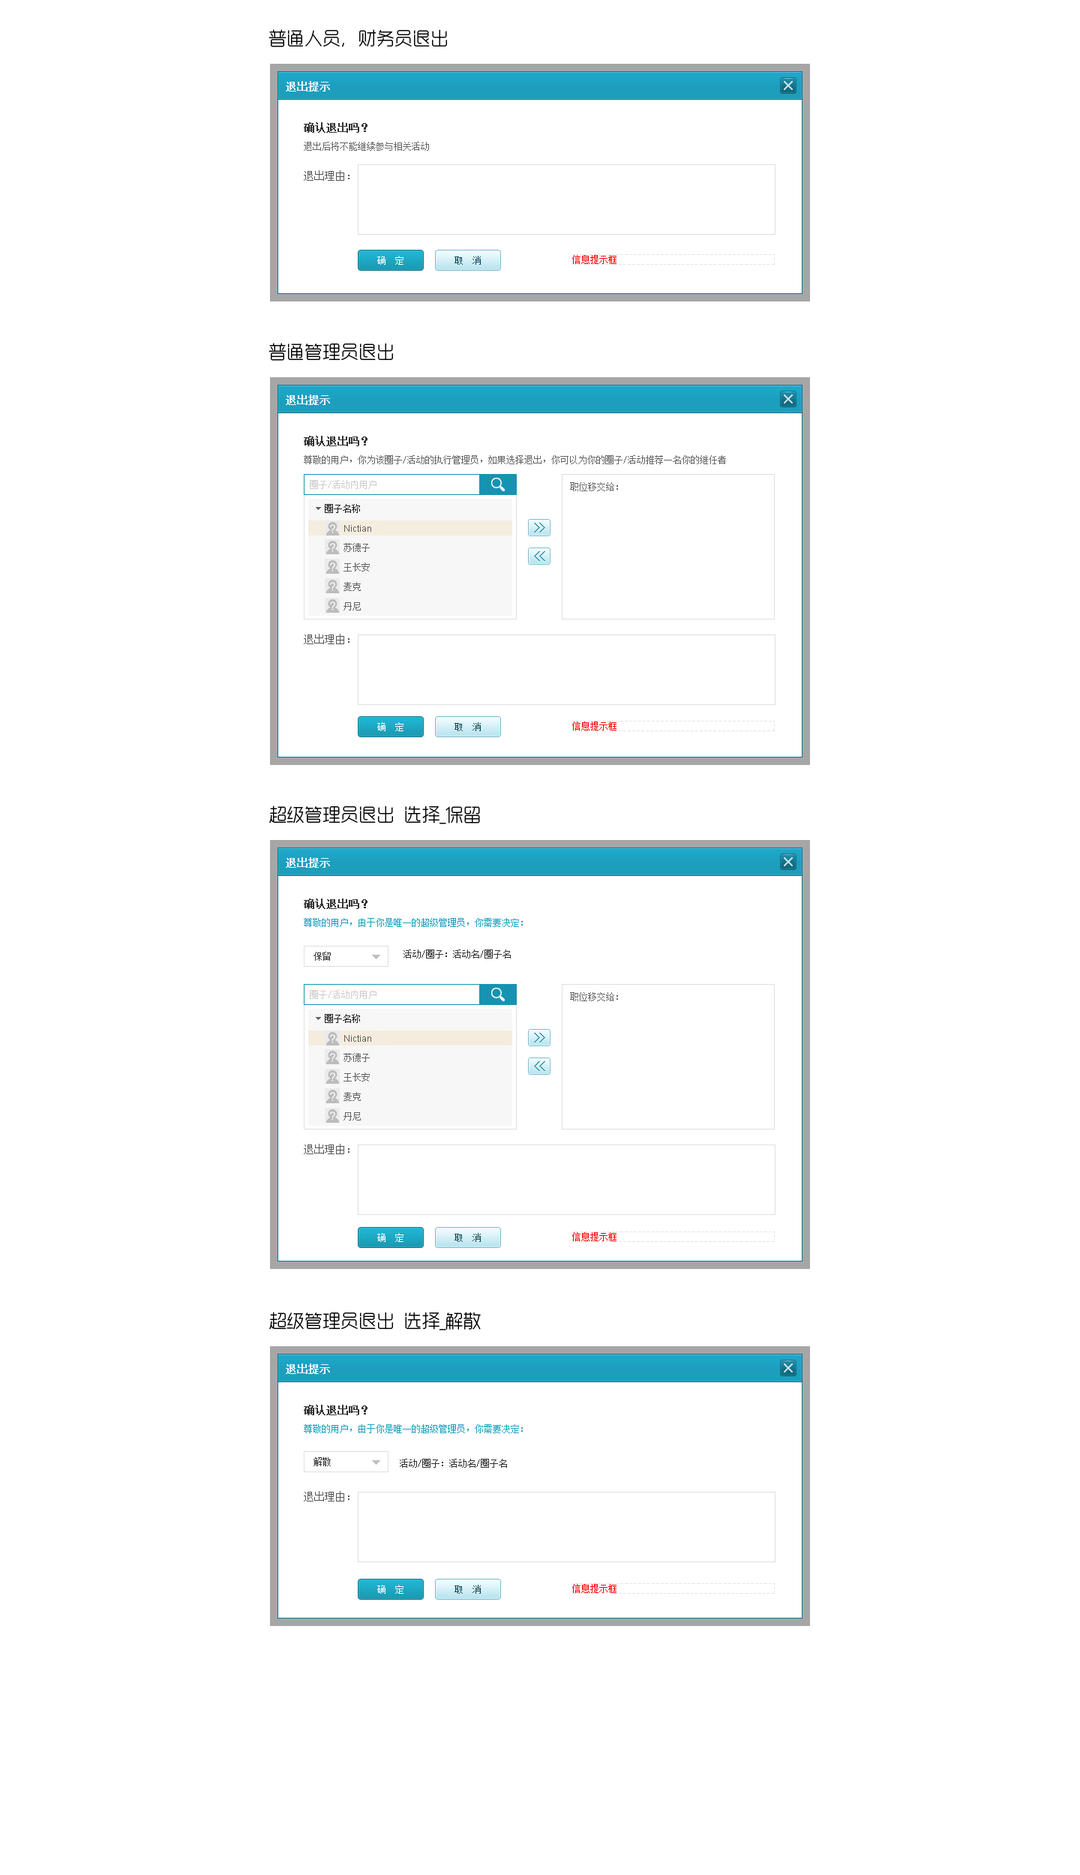
<style>
.page{position:relative;width:1080px;height:1875px;background:#ffffff}
.page>*{position:absolute;margin:0}
.t1{font:18px "RTWSYueGoTrial-Light";color:#000000}
.t2{font:10.5px "SimSun";color:#eef7fe;font-weight:bold}
.t3{font:10.5px "SimSun";color:#333333;font-weight:bold}
.t4{font:9px/28.5px "SimSun";color:#666666}
.t5{font:10.5px/28.5px "SimSun";color:#555555}
.t6{font:9px "SimSun";color:#ffffff}
.t7{font:9px "SimSun";color:#044455}
.t8{font:9px "SimSun";color:#666666}
.t9{font:9px "SimSun";color:#cccccc}
.t10{font:10.5px "SimSun";color:#555555}
.t11{font:9px "SimSun";color:#1ca1c1}
.t12{font:9px "SimSun";color:#333333}
</style>
<div class="page">
<p class="t1" style="left:268px;top:29px;width:179px;height:18px">普通人员，财务员退出</p>
<p class="t2" style="left:286px;top:81px;width:44px;height:11px">退出提示</p>
<p class="t3" style="left:304px;top:122px;width:64px;height:11px">确认退出吗？</p>
<p class="t4" style="left:304px;top:142px;width:125px;height:39px">退出后将不能继续参与相关活动<br><span class="t5">退出理由：</span></p>
<p class="t6" style="left:377px;top:256px;width:27px;height:9px">确  定</p>
<p class="t7" style="left:454px;top:256px;width:27px;height:9px">取  消</p>
<p class="t1" style="left:268px;top:343px;width:125px;height:18px">普通管理员退出</p>
<p class="t2" style="left:286px;top:394px;width:44px;height:11px">退出提示</p>
<p class="t3" style="left:304px;top:436px;width:64px;height:10px">确认退出吗？</p>
<p class="t8" style="left:304px;top:455px;width:422px;height:9px">尊敬的用户，你为该圈子/活动的执行管理员，如果选择退出，你可以为你的圈子/活动推荐一名你的继任者</p>
<p class="t9" style="left:310px;top:480px;width:66px;height:9px">圈子/活动内用户</p>
<p class="t8" style="left:570px;top:482px;width:48px;height:9px">职位移交给：</p>
<p class="t10" style="left:304px;top:634px;width:46px;height:10px">退出理由：</p>
<p class="t6" style="left:377px;top:722px;width:27px;height:9px">确  定</p>
<p class="t7" style="left:454px;top:722px;width:27px;height:9px">取  消</p>
<p class="t1" style="left:269px;top:806px;width:211px;height:18px">超级管理员退出  选择_保留</p>
<p class="t2" style="left:286px;top:857px;width:44px;height:11px">退出提示</p>
<p class="t3" style="left:304px;top:898px;width:64px;height:11px">确认退出吗？</p>
<p class="t11" style="left:304px;top:918px;width:219px;height:9px">尊敬的用户，由于你是唯一的超级管理员，你需要决定：</p>
<p class="t12" style="left:314px;top:952px;width:17px;height:9px">保留</p>
<p class="t12" style="left:404px;top:950px;width:107px;height:8px">活动/圈子：活动名/圈子名</p>
<p class="t9" style="left:310px;top:990px;width:66px;height:9px">圈子/活动内用户</p>
<p class="t8" style="left:570px;top:992px;width:48px;height:9px">职位移交给：</p>
<p class="t10" style="left:304px;top:1144px;width:46px;height:10px">退出理由：</p>
<p class="t6" style="left:377px;top:1233px;width:27px;height:9px">确  定</p>
<p class="t7" style="left:454px;top:1233px;width:27px;height:9px">取  消</p>
<p class="t1" style="left:269px;top:1312px;width:212px;height:18px">超级管理员退出  选择_解散</p>
<p class="t2" style="left:286px;top:1364px;width:44px;height:10px">退出提示</p>
<p class="t3" style="left:304px;top:1405px;width:64px;height:10px">确认退出吗？</p>
<p class="t11" style="left:304px;top:1424px;width:219px;height:9px">尊敬的用户，由于你是唯一的超级管理员，你需要决定：</p>
<p class="t12" style="left:314px;top:1457px;width:17px;height:9px">解散</p>
<p class="t12" style="left:400px;top:1459px;width:107px;height:9px">活动/圈子：活动名/圈子名</p>
<p class="t10" style="left:304px;top:1491px;width:46px;height:11px">退出理由：</p>
<p class="t6" style="left:377px;top:1585px;width:27px;height:9px">确  定</p>
<p class="t7" style="left:454px;top:1585px;width:27px;height:9px">取  消</p>
</div>
